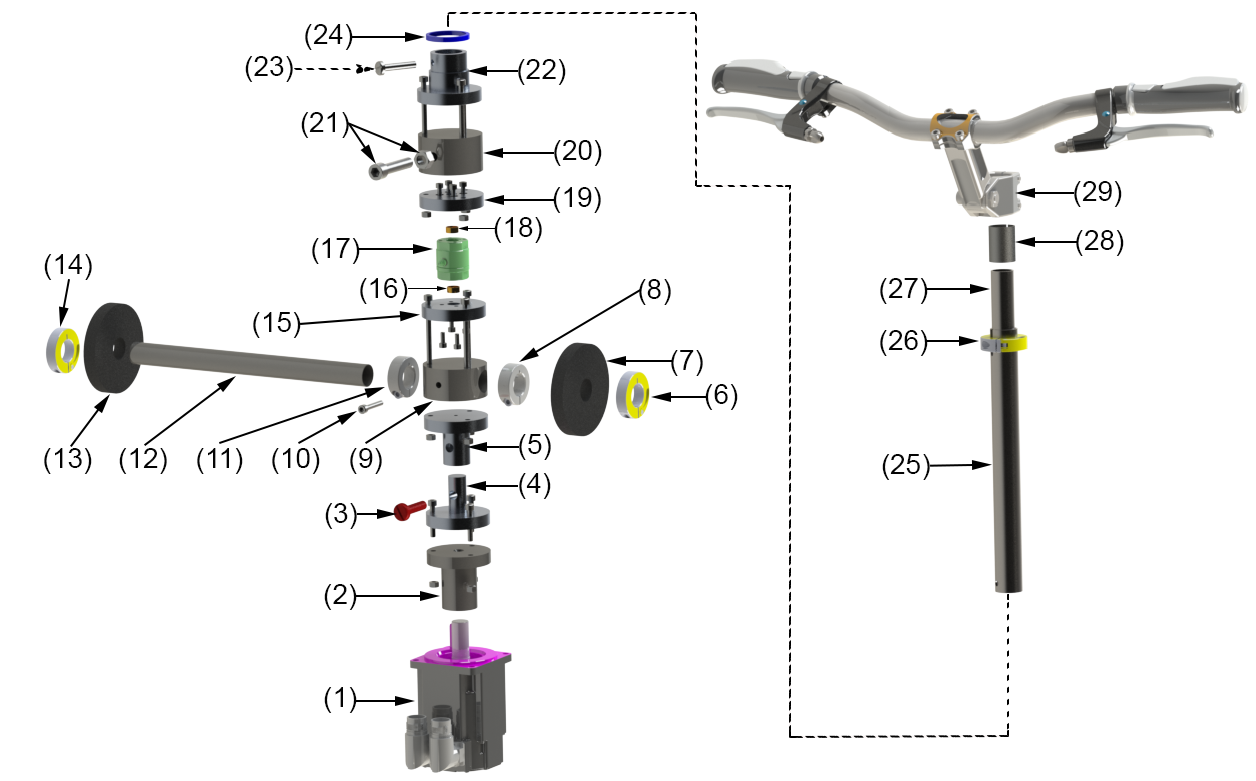
<style>
.page{position:relative;width:1256px;height:781px;background:#ffffff}
.page>*{position:absolute;margin:0}
.t1{font:28px "ArialMT";color:#040404}
</style>
<div class="page">
<p class="t1" style="left:305px;top:24px;width:48px;height:26px">(24)</p>
<p class="t1" style="left:245px;top:56px;width:48px;height:26px">(23)</p>
<p class="t1" style="left:518px;top:59px;width:48px;height:26px">(22)</p>
<p class="t1" style="left:301px;top:112px;width:48px;height:26px">(21)</p>
<p class="t1" style="left:554px;top:140px;width:48px;height:26px">(20)</p>
<p class="t1" style="left:1074px;top:181px;width:48px;height:26px">(29)</p>
<p class="t1" style="left:553px;top:187px;width:48px;height:26px">(19)</p>
<p class="t1" style="left:494px;top:217px;width:48px;height:26px">(18)</p>
<p class="t1" style="left:1076px;top:230px;width:48px;height:26px">(28)</p>
<p class="t1" style="left:312px;top:238px;width:48px;height:26px">(17)</p>
<p class="t1" style="left:44px;top:254px;width:48px;height:26px">(14)</p>
<p class="t1" style="left:360px;top:278px;width:48px;height:26px">(16)</p>
<p class="t1" style="left:639px;top:279px;width:32px;height:26px">(8)</p>
<p class="t1" style="left:880px;top:278px;width:48px;height:26px">(27)</p>
<p class="t1" style="left:253px;top:312px;width:48px;height:26px">(15)</p>
<p class="t1" style="left:880px;top:330px;width:48px;height:26px">(26)</p>
<p class="t1" style="left:671px;top:350px;width:32px;height:26px">(7)</p>
<p class="t1" style="left:705px;top:384px;width:33px;height:26px">(6)</p>
<p class="t1" style="left:519px;top:434px;width:32px;height:26px">(5)</p>
<p class="t1" style="left:44px;top:448px;width:48px;height:26px">(13)</p>
<p class="t1" style="left:119px;top:448px;width:48px;height:26px">(12)</p>
<p class="t1" style="left:197px;top:448px;width:46px;height:26px">(11)</p>
<p class="t1" style="left:272px;top:448px;width:48px;height:26px">(10)</p>
<p class="t1" style="left:350px;top:448px;width:32px;height:26px">(9)</p>
<p class="t1" style="left:882px;top:454px;width:48px;height:26px">(25)</p>
<p class="t1" style="left:519px;top:473px;width:32px;height:26px">(4)</p>
<p class="t1" style="left:325px;top:503px;width:32px;height:26px">(3)</p>
<p class="t1" style="left:324px;top:584px;width:33px;height:26px">(2)</p>
<p class="t1" style="left:324px;top:687px;width:33px;height:26px">(1)</p>
</div>
